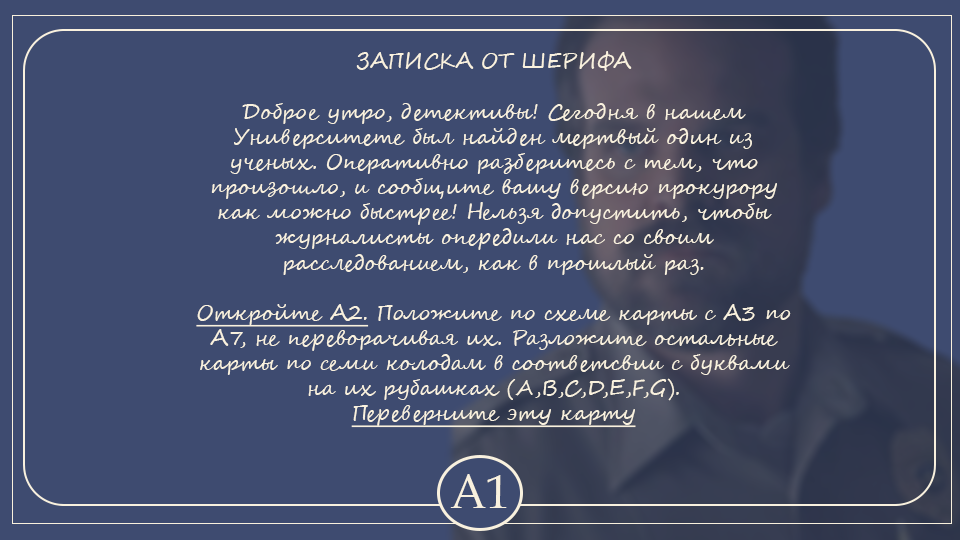
<style>
.page{position:relative;width:960px;height:540px;background:#3e4b70}
.page>*{position:absolute;margin:0}
.t1{font:21px "SegoeScript";color:#f9f1de}
.t2{font:21px "SegoeScript";color:#f9f1de;text-transform:uppercase}
.t3{font:21px "SegoeScript";color:#f9f1de;text-decoration:underline}
.t4{font:46.6px "BookAntiqua";color:#f9f1de}
</style>
<div class="page">
<p class="t1" style="left:196px;top:51px;width:595px;height:377px;text-align:center"><span class="t2">Записка от шерифа<br></span><br>Доброе утро, детективы! Сегодня в нашем Университете был найден мертвый один из ученых. Оперативно разберитесь с тем, что произошло, и сообщите вашу версию прокурору как можно быстрее! Нельзя допустить, чтобы журналисты опередили нас со своим расследованием, как в прошлый раз.<br><br><span class="t3">Откройте А2.</span> Положите по схеме карты с А3 по А7, не переворачивая их. Разложите остальные карты по семи колодам в соответсвии с буквами на их рубашках (A,B,C,D,E,F,G).<br><span class="t3">Переверните эту карту</span></p>
<p class="t4" style="left:450px;top:474px;width:57px;height:34px">A1</p>
</div>
